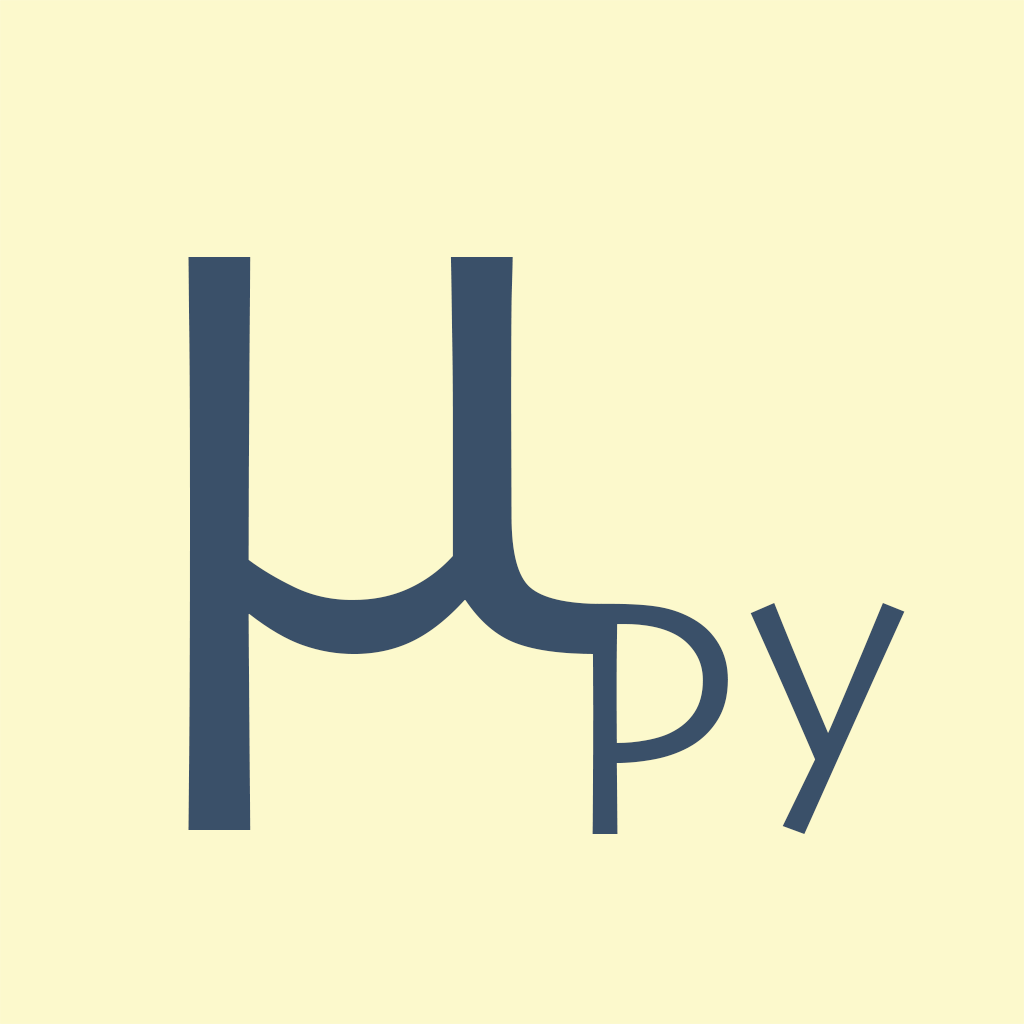
<style>
.page{position:relative;width:1024px;height:1024px;background:#fcf9cc}
.page>*{position:absolute;margin:0}
.t1{font:800px "Skia-Regular";color:#3a5069}
.t2{font:320px "Skia-Regular";color:#3a5069}
</style>
<div class="page">
<p class="t1" style="left:188px;top:257px;width:414px;height:573px">μ</p>
<p class="t2" style="left:592px;top:603px;width:313px;height:231px">py</p>
</div>
